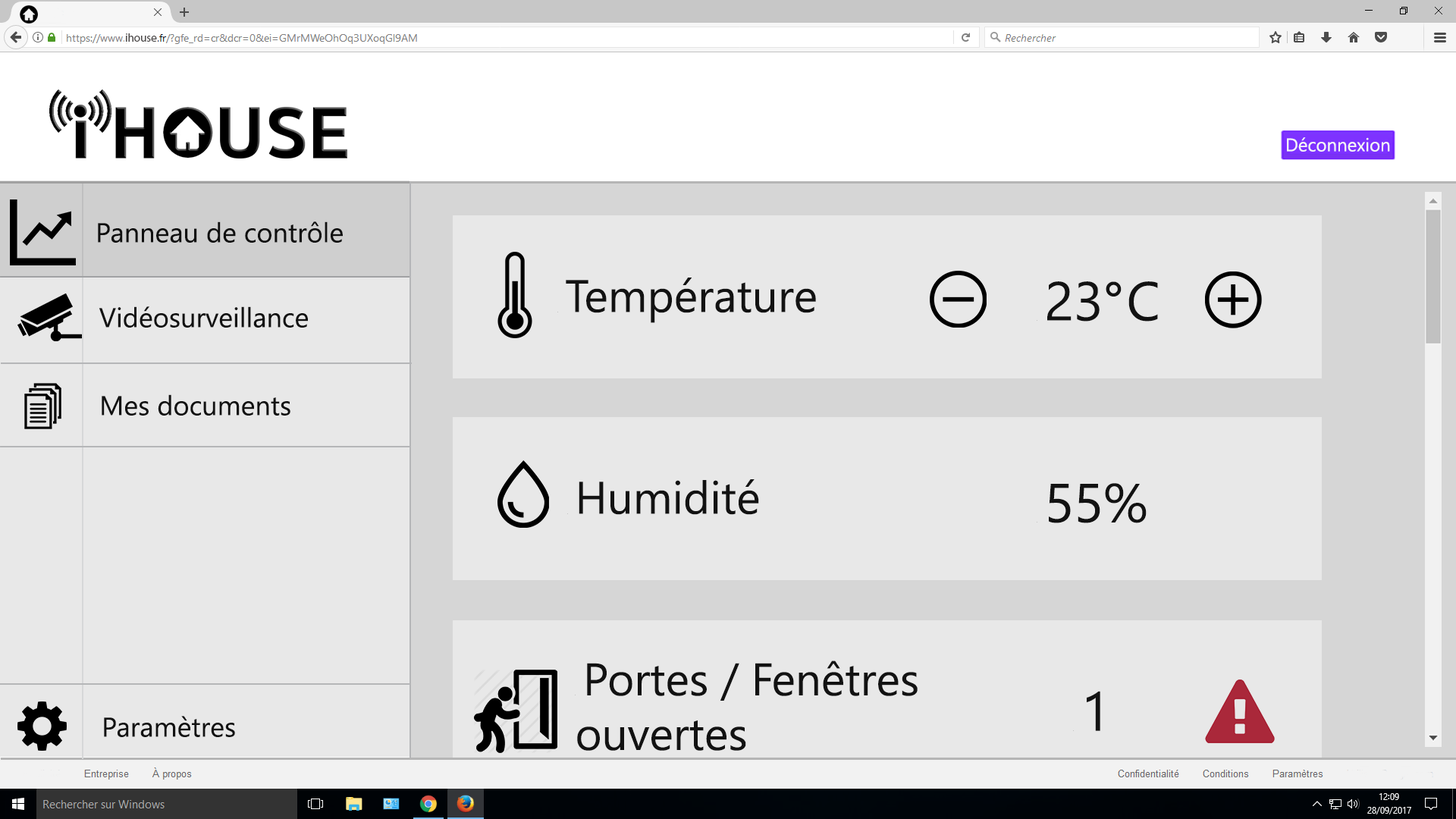
<style>
.page{position:relative;width:1456px;height:819px;background:#e8e8e8}
.page>*{position:absolute;margin:0}
.t1{font:11.4px "MyriadPro-Regular";color:#4b4848}
.t2{font:18.2px "YuGothicUI-Regular";color:#f6f6f6}
.t3{font:27.3px "YuGothicUI-Regular";color:#121212}
.t4{font:45.5px "YuGothicUI-Regular";color:#121212}
.t5{font:0.8px "YuGothicUI-Regular";color:#121212}
.t6{font:54.6px "YuGothicUI-Regular";color:#121212}
.t7{font:54.8px "YuGothicUI-Regular";color:#121212}
</style>
<div class="page">
<p class="t1" style="left:126px;top:33px;width:31px;height:9px">ihouse</p>
<p class="t2" style="left:1287px;top:137px;width:103px;height:15px">Déconnexion</p>
<p class="t3" style="left:98px;top:221px;width:245px;height:22px">Panneau de contrôle</p>
<p class="t4" style="left:557px;top:278px;width:259px;height:45px"><span class="t5">- </span>Température</p>
<p class="t6" style="left:1037px;top:281px;width:121px;height:41px"><span class="t5">- </span>23°  C</p>
<p class="t3" style="left:99px;top:306px;width:209px;height:22px">Vidéosurveillance</p>
<p class="t3" style="left:102px;top:394px;width:188px;height:22px">Mes documents</p>
<p class="t4" style="left:567px;top:479px;width:192px;height:36px"><span class="t5">- </span>Humidité</p>
<p class="t6" style="left:1037px;top:483px;width:110px;height:40px"><span class="t5">- </span>55%</p>
<p class="t4" style="left:575px;top:660px;width:343px;height:91px"><span class="t5">- </span>Portes / Fenêtres<br>ouvertes</p>
<p class="t5" style="left:1073px;top:691px;width:27px;height:40px">- <span class="t7">1</span></p>
<p class="t3" style="left:104px;top:716px;width:131px;height:21px">Paramètres</p>
</div>
